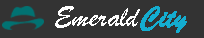
<style>
.page{position:relative;width:204px;height:38px;background:#333333}
.page>*{position:absolute;margin:0}
.t1{font:30px "STXingkai";color:#ffffff}
.t2{font:30px "STXingkai";color:#14add0;font-weight:bold}
</style>
<div class="page">
<p class="t1" style="left:55px;top:6px;width:132px;height:27px">Emerald<span class="t2">City</span></p>
</div>
